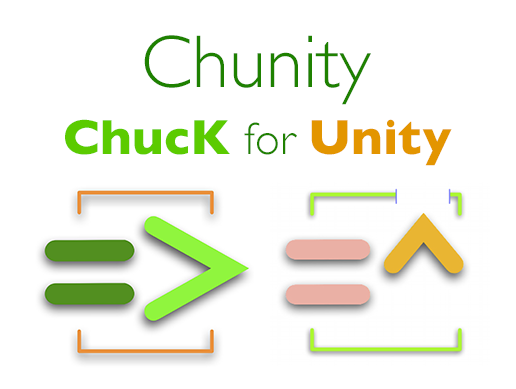
<style>
.page{position:relative;width:516px;height:389px;background:#ffffff}
.page>*{position:absolute;margin:0}
.t1{font:75px "GillSans-Light";color:#1f8200}
.t2{font:50px "GillSans-Bold";color:#5bcc00}
.t3{font:45.8px "GillSans-Light";color:#1f8200}
.t4{font:50px "GillSans-Bold";color:#e39600}
</style>
<div class="page">
<p class="t1" style="left:144px;top:35px;width:227px;height:70px">Chunity</p>
<p class="t2" style="left:65px;top:119px;width:387px;height:47px">ChucK <span class="t3">for </span><span class="t4">Unity</span></p>
</div>
